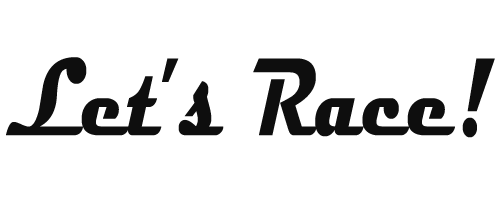
<style>
.page{position:relative;width:500px;height:200px;background:#ffffff}
.page>*{position:absolute;margin:0}
.t1{font:111.8px "Magneto-Bold";color:#0e0e0e;scale:0.67 1}
</style>
<div class="page">
<p class="t1" style="left:6px;top:57px;width:489px;height:81px">Let’s Race!</p>
</div>
